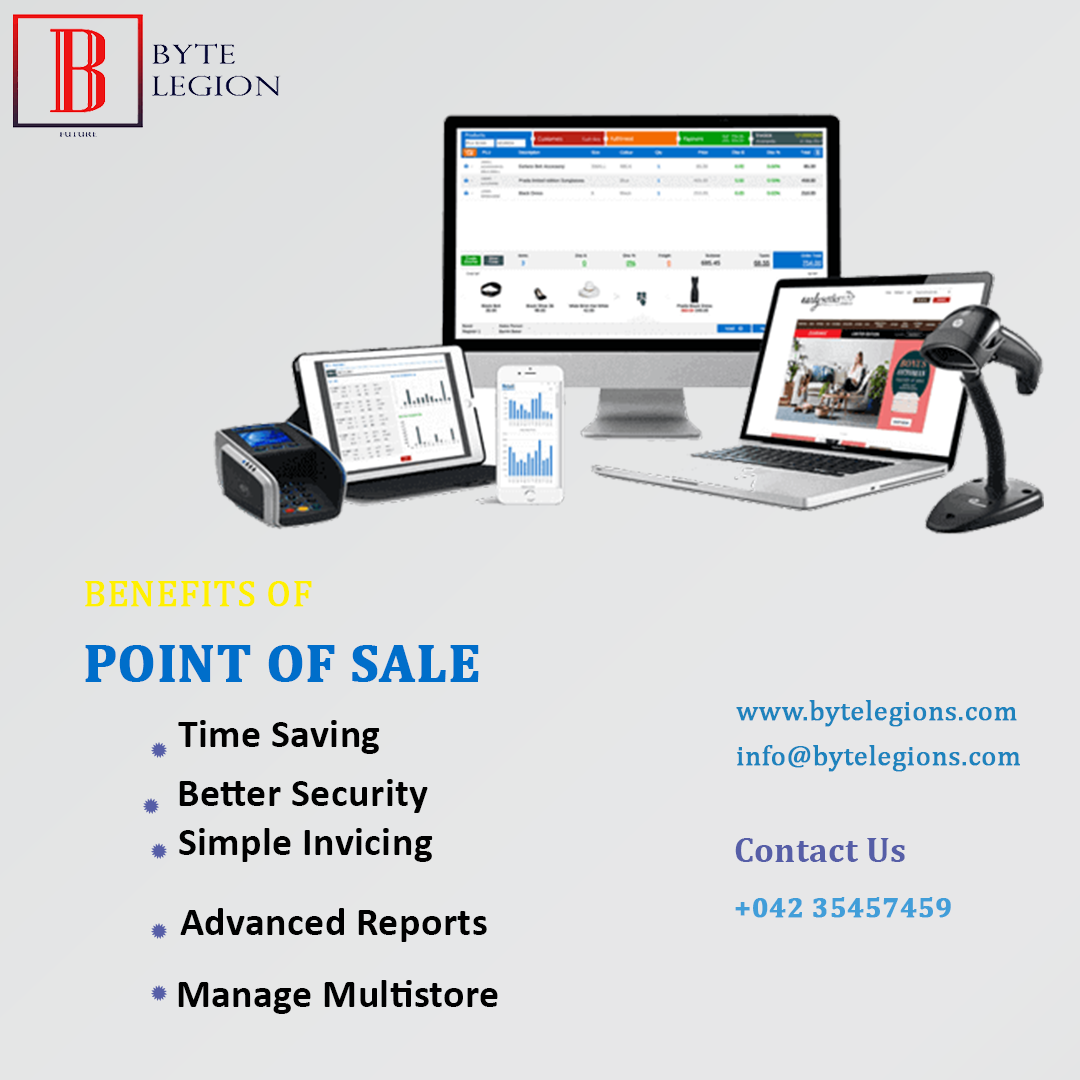
<style>
.page{position:relative;width:1080px;height:1080px}
.page>*{position:absolute;margin:0}
.t1{font:53.6px/74.3px "Cambria-Bold";letter-spacing:0.01em;color:#006eca;text-transform:uppercase;font-weight:bold}
.t2{font:37px/74.3px "Cambria";letter-spacing:0.01em;color:#fff000;text-transform:uppercase;font-weight:bold}
.t3{font:28px "Cambria";letter-spacing:0.01em;color:#1e83bd;font-weight:bold}
.t4{font:40px "Calibri-Bold";letter-spacing:0.01em;color:#010101}
.t5{font:35px "Cambria-Bold";letter-spacing:0.01em;color:#565ea7}
.t6{font:28px "Cambria-Bold";letter-spacing:0.01em;color:#419ed9;font-weight:bold}
</style>
<div class="page">
<p class="t1" style="left:85px;top:581px;width:394px;height:101px"><span class="t2">Benefits of<br></span>Point Of Sale</p>
<p class="t3" style="left:736px;top:700px;width:281px;height:27px">www.bytelegions.com</p>
<p class="t4" style="left:178px;top:720px;width:202px;height:34px">Time Saving</p>
<p class="t3" style="left:737px;top:745px;width:283px;height:27px">info@bytelegions.com</p>
<p class="t4" style="left:179px;top:779px;width:249px;height:34px">Better Security</p>
<p class="t4" style="left:179px;top:828px;width:254px;height:34px">Simple Invicing</p>
<p class="t5" style="left:735px;top:838px;width:170px;height:24px">Contact Us</p>
<p class="t6" style="left:735px;top:897px;width:216px;height:21px">+042 35457459</p>
<p class="t4" style="left:180px;top:908px;width:307px;height:34px">Advanced Reports</p>
<p class="t4" style="left:178px;top:980px;width:320px;height:34px">Manage Multistore</p>
</div>
